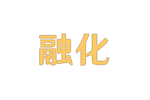
<style>
.page{position:relative;width:150px;height:100px;background:#ffffff}
.page>*{position:absolute;margin:0}
.t1{font:35.4px "HYWenHei-HEW";letter-spacing:0.05em;color:#ffc964}
</style>
<div class="page">
<p class="t1" style="left:39px;top:33px;width:71px;height:33px">融化</p>
</div>
